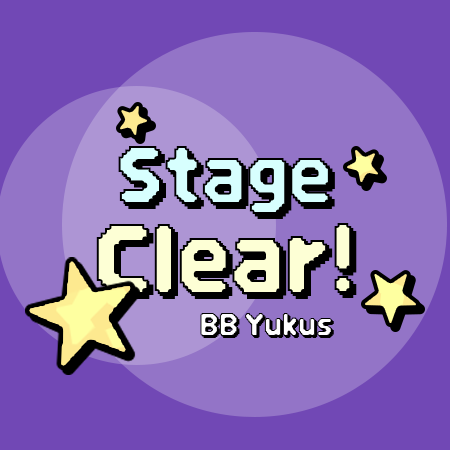
<style>
.page{position:relative;width:450px;height:450px;background:#7148b5}
.page>*{position:absolute;margin:0}
.t1{font:92.9px "DNFBitBitTTF"}
.t2{font:77.4px "DNFBitBitTTF"}
.t3{font:30px "DNFBitBitTTF"}
</style>
<div class="page">
<p class="t1" style="left:96px;top:146px;width:256px;height:148px"><span class="t2">Stage </span>Clear!</p>
<p class="t3" style="left:200px;top:313px;width:132px;height:23px">BB Yukus</p>
</div>
